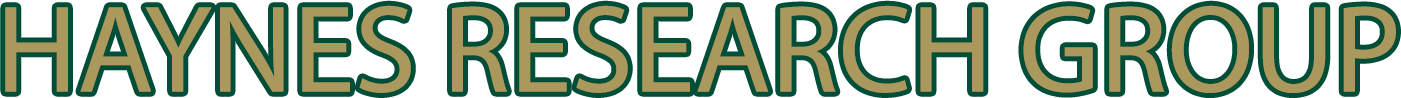
<style>
.page{position:relative;width:1401px;height:98px;background:#ffffff}
.page>*{position:absolute;margin:0}
.t1{font:125px "MyriadPro-Regular";color:#aa985d}
</style>
<div class="page">
<p class="t1" style="left:5px;top:5px;width:1391px;height:88px">HAYNES RESEARCH GROUP</p>
</div>
